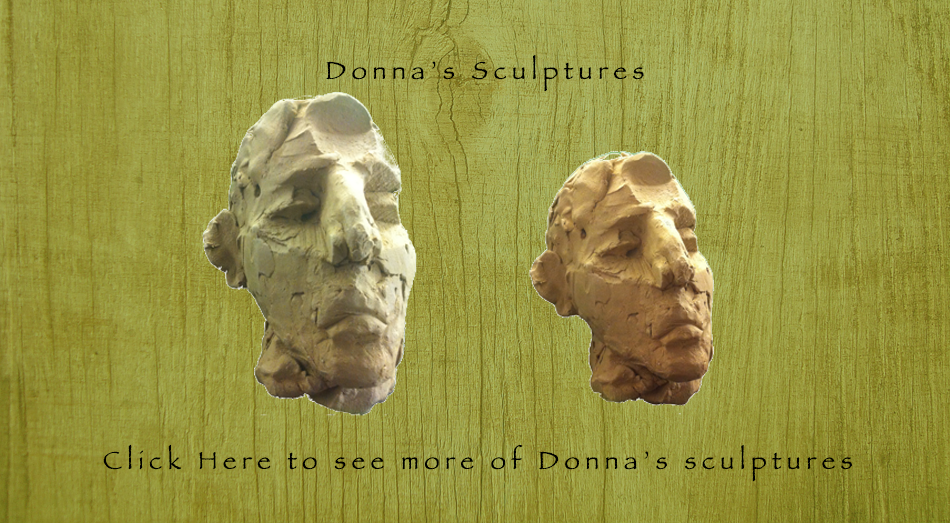
<style>
.page{position:relative;width:950px;height:523px}
.page>*{position:absolute;margin:0}
.t1{font:43.3px "Papyrus";letter-spacing:0.22em;color:#000000}
</style>
<div class="page">
<p class="t1" style="left:326px;top:54px;width:318px;height:38px">Donna’s Sculptures</p>
<p class="t1" style="left:103px;top:444px;width:749px;height:38px">Click Here to see more of Donna’s sculptures</p>
</div>
